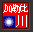
<style>
.page{position:relative;width:33px;height:32px;background:#f20000}
.page>*{position:absolute;margin:0}
.t1{font:10.4px "SimSun";letter-spacing:-0.25em;color:#ffffff}
.t2{font:11.7px "SimSun";color:#ffffff}
</style>
<div class="page">
<p class="t1" style="left:3px;top:4px;width:25px;height:9px">加勒比</p>
<p class="t2" style="left:16px;top:15px;width:11px;height:12px">川</p>
</div>
